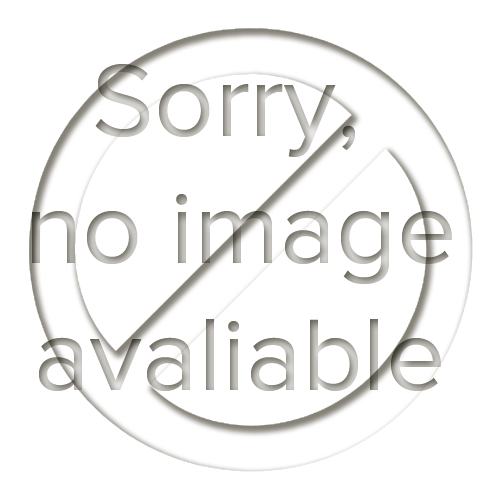
<style>
.page{position:relative;width:500px;height:500px;background:#ffffff}
.page>*{position:absolute;margin:0}
.t1{font:106px "ProximaNova-Regular"}
</style>
<div class="page">
<p class="t1" style="left:32px;top:64px;width:420px;height:327px;text-align:center">Sorry, <br>no image<br>avaliable</p>
</div>
